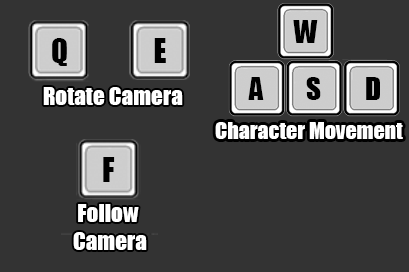
<style>
.page{position:relative;width:409px;height:272px;background:#333333}
.page>*{position:absolute;margin:0}
.t1{font:29.3px "Impact";color:#000000}
.t2{font:31px "Impact";color:#000000}
.t3{font:23.2px "Impact";color:#ffffff}
.t4{font:21.9px "Impact";color:#ffffff}
.t5{font:31.1px "Impact";color:#000000}
</style>
<div class="page">
<p class="t1" style="left:293px;top:20px;width:25px;height:23px">W</p>
<p class="t2" style="left:52px;top:38px;width:15px;height:28px">Q</p>
<p class="t2" style="left:154px;top:38px;width:12px;height:25px">E</p>
<p class="t1" style="left:248px;top:77px;width:16px;height:23px">A</p>
<p class="t1" style="left:306px;top:77px;width:15px;height:23px">S</p>
<p class="t1" style="left:366px;top:77px;width:14px;height:23px">D</p>
<p class="t3" style="left:43px;top:87px;width:140px;height:18px">Rotate Camera</p>
<p class="t4" style="left:215px;top:122px;width:188px;height:17px">Character Movement</p>
<p class="t5" style="left:103px;top:157px;width:12px;height:25px">F</p>
<p class="t3" style="left:73px;top:204px;width:74px;height:46px;text-align:center">Follow <br>Camera</p>
</div>
